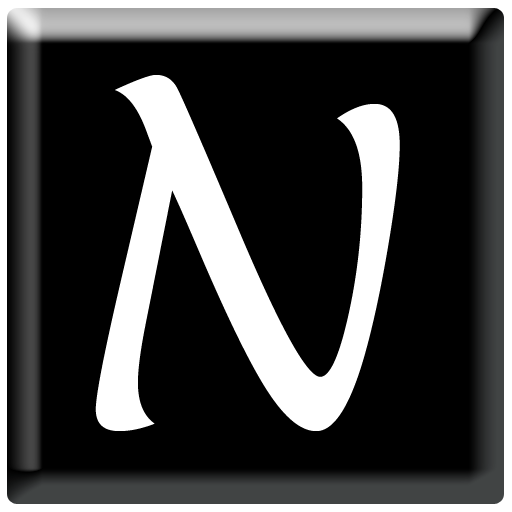
<style>
.page{position:relative;width:512px;height:512px;background:#000000}
.page>*{position:absolute;margin:0}
.t1{font:431px "LucidaHandwriting-Italic";color:#ffffff}
</style>
<div class="page">
<p class="t1" style="left:95px;top:75px;width:305px;height:356px">N</p>
</div>
